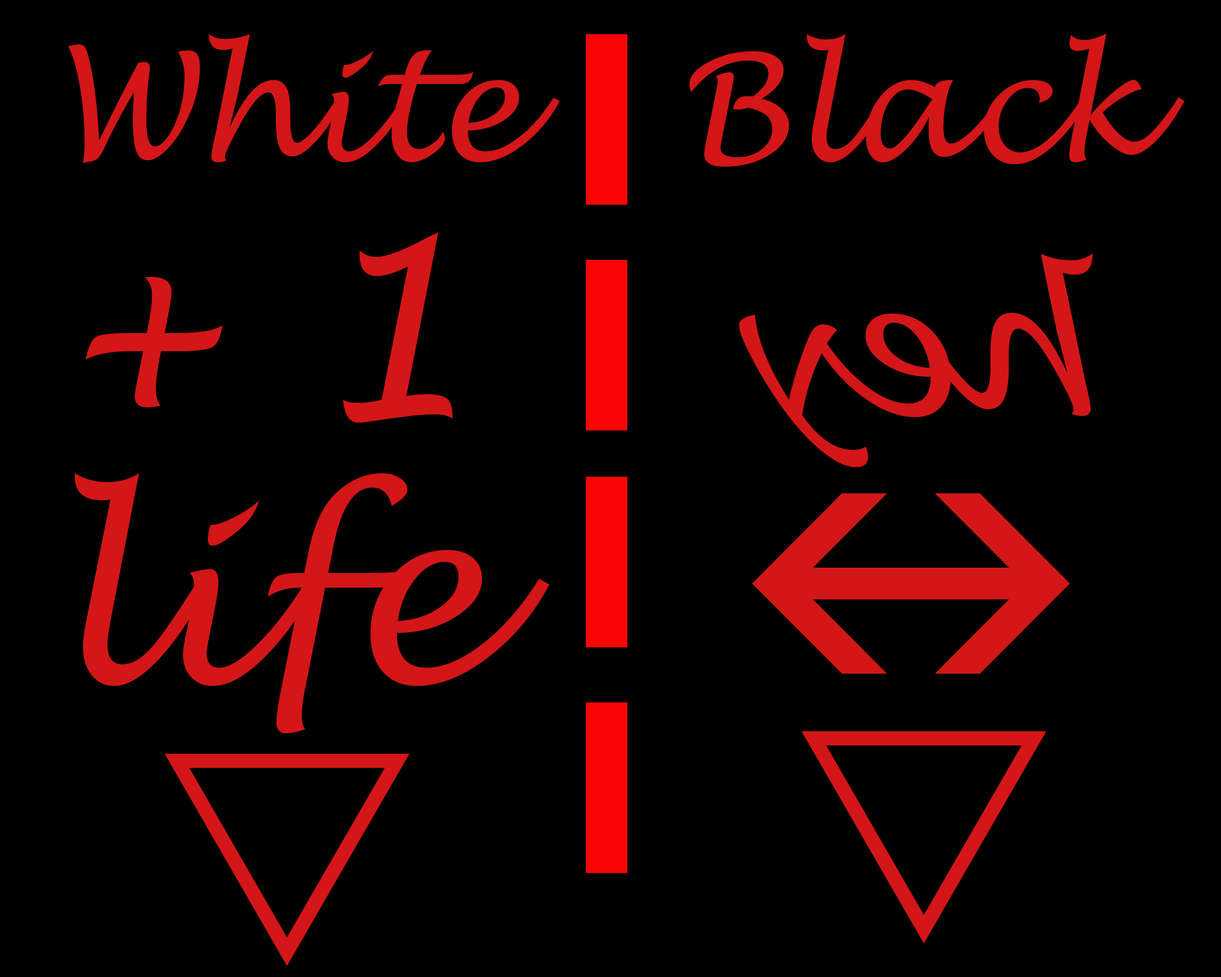
<style>
.page{position:relative;width:1221px;height:977px;background:#000000}
.page>*{position:absolute;margin:0}
.t1{font:147.5px "LucidaHandwriting-Italic";color:#d31618}
.t2{font:245.2px/268.6px "LucidaHandwriting-Italic";color:#d31618}
.t3{font:186.8px "LucidaHandwriting-Italic";color:#d31618}
</style>
<div class="page">
<p class="t1" style="left:68px;top:34px;width:492px;height:129px">White</p>
<p class="t1" style="left:689px;top:34px;width:496px;height:133px">Black</p>
<p class="t2" style="left:75px;top:232px;width:474px;height:501px;text-align:center">+ 1<br>life</p>
<p class="t3" style="left:739px;top:253px;width:353px;height:214px;rotate:180deg">hey</p>
</div>
